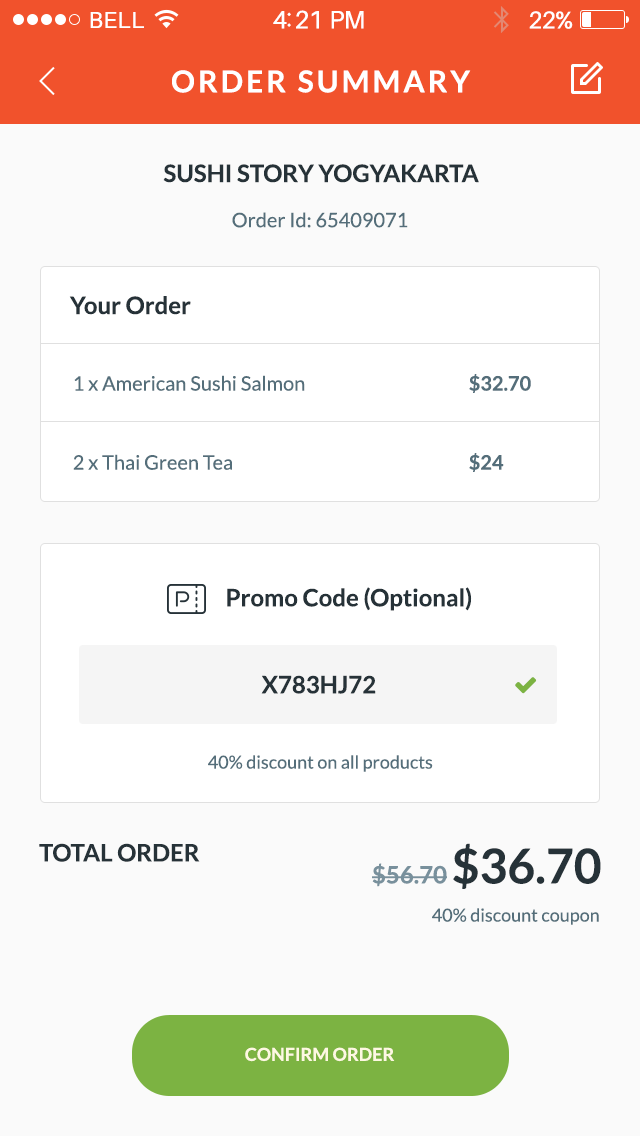
<style>
.page{position:relative;width:640px;height:1136px;background:#fafafa}
.page>*{position:absolute;margin:0}
.t1{font:23px "Aileron-Regular";letter-spacing:0.02em;color:#ffffff}
.t2{font:25px "Aileron-Regular";letter-spacing:-0.02em;color:#ffffff}
.t3{font:24px "Aileron-Regular";letter-spacing:-0.02em;color:#ffffff}
.t4{font:30px "Lato-Bold";letter-spacing:0.1em;color:#ffffff;text-transform:uppercase}
.t5{font:24px "Lato-Bold";color:#263238;text-transform:uppercase}
.t6{font:20px "Lato-Regular";color:#546e7a}
.t7{font:24px "Lato-Bold";color:#263238}
.t8{font:20px "Lato-Bold";color:#546e7a}
.t9{font:24px/30px "Lato-Bold";color:#263238}
.t10{font:24px/30px "Lato-Regular";color:#263238}
.t11{font:18px "Lato-Regular";color:#546e7a}
.t12{font:24px "Lato-Bold";color:#78909c;text-transform:uppercase}
.t13{font:48px "Lato-Bold";color:#263238;text-transform:uppercase}
.t14{font:18px "Lato-Bold";color:#fef8e2;text-transform:uppercase}
</style>
<div class="page">
<p class="t1" style="left:90px;top:12px;width:54px;height:16px">BELL</p>
<p class="t2" style="left:273px;top:10px;width:91px;height:19px">4:21 PM</p>
<p class="t3" style="left:529px;top:11px;width:44px;height:18px">22%</p>
<p class="t4" style="left:172px;top:70px;width:299px;height:23px">Order Summary</p>
<p class="t5" style="left:163px;top:164px;width:316px;height:19px">Sushi Story Yogyakarta</p>
<p class="t6" style="left:232px;top:212px;width:176px;height:16px">Order Id: 65409071</p>
<p class="t7" style="left:69px;top:296px;width:122px;height:19px">Your Order</p>
<p class="t6" style="left:74px;top:374px;width:457px;height:19px">1 x American Sushi Salmon     <span class="t8">$32.70</span></p>
<p class="t6" style="left:73px;top:453px;width:431px;height:19px">2 x Thai Green Tea       <span class="t8">$24</span></p>
<p class="t9" style="left:227px;top:587px;width:245px;height:24px">Promo Code (Optional)<br><span class="t10">,</span></p>
<p class="t11" style="left:208px;top:755px;width:225px;height:17px">40% discount on all products</p>
<p class="t5" style="left:39px;top:843px;width:161px;height:19px">Total Order</p>
<p class="t12" style="left:372px;top:843px;width:229px;height:46px">$56.70 <span class="t13">$36.70</span></p>
<p class="t11" style="left:432px;top:908px;width:167px;height:17px">40% discount coupon</p>
<p class="t14" style="left:245px;top:1047px;width:150px;height:15px">Confirm Order</p>
</div>
